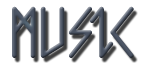
<style>
.page{position:relative;width:150px;height:64px;background:#ffffff}
.page>*{position:absolute;margin:0}
.t1{font:64px "ComicRunes";color:#4a5363}
</style>
<div class="page">
<p class="t1" style="left:12px;top:6px;width:122px;height:52px">MUSIC</p>
</div>
